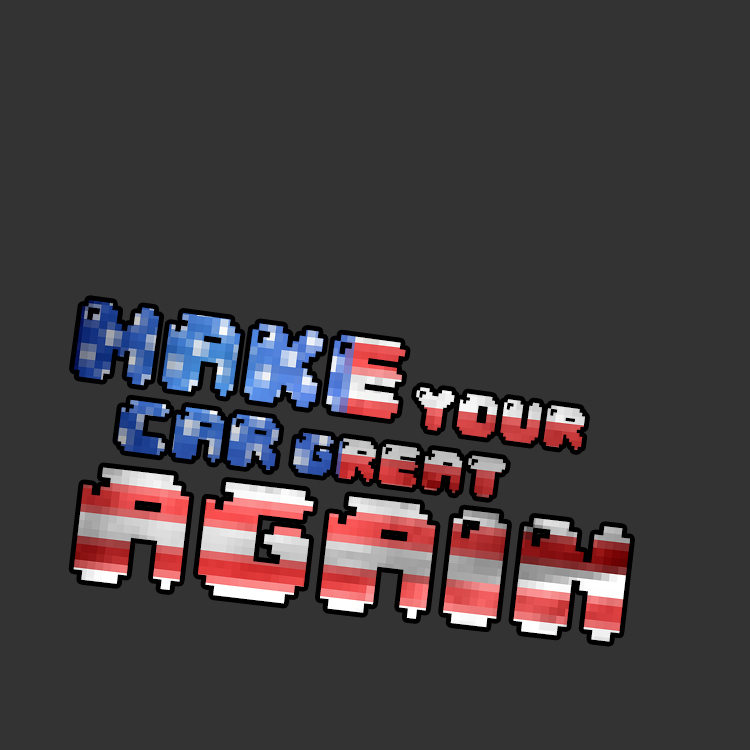
<style>
.page{position:relative;width:750px;height:750px;background:#333333}
.page>*{position:absolute;margin:0}
.t1{font:108.5px "04b30";scale:0.93 1}
.t2{font:57.8px "04b30";scale:0.93 1}
.t3{font:72.4px "04b30";scale:0.93 1}
.t4{font:56.4px "04b30";scale:0.93 1}
.t5{font:161.2px "04b30";scale:0.93 1}
</style>
<div class="page">
<p class="t1" style="left:74px;top:300px;width:332px;height:119px;rotate:8deg">make</p>
<p class="t2" style="left:416px;top:387px;width:169px;height:63px;rotate:8deg">your</p>
<p class="t3" style="left:117px;top:399px;width:163px;height:71px;rotate:8deg">car</p>
<p class="t4" style="left:293px;top:432px;width:213px;height:66px;rotate:8deg">great</p>
<p class="t5" style="left:73px;top:467px;width:557px;height:175px;rotate:7deg">again</p>
</div>
